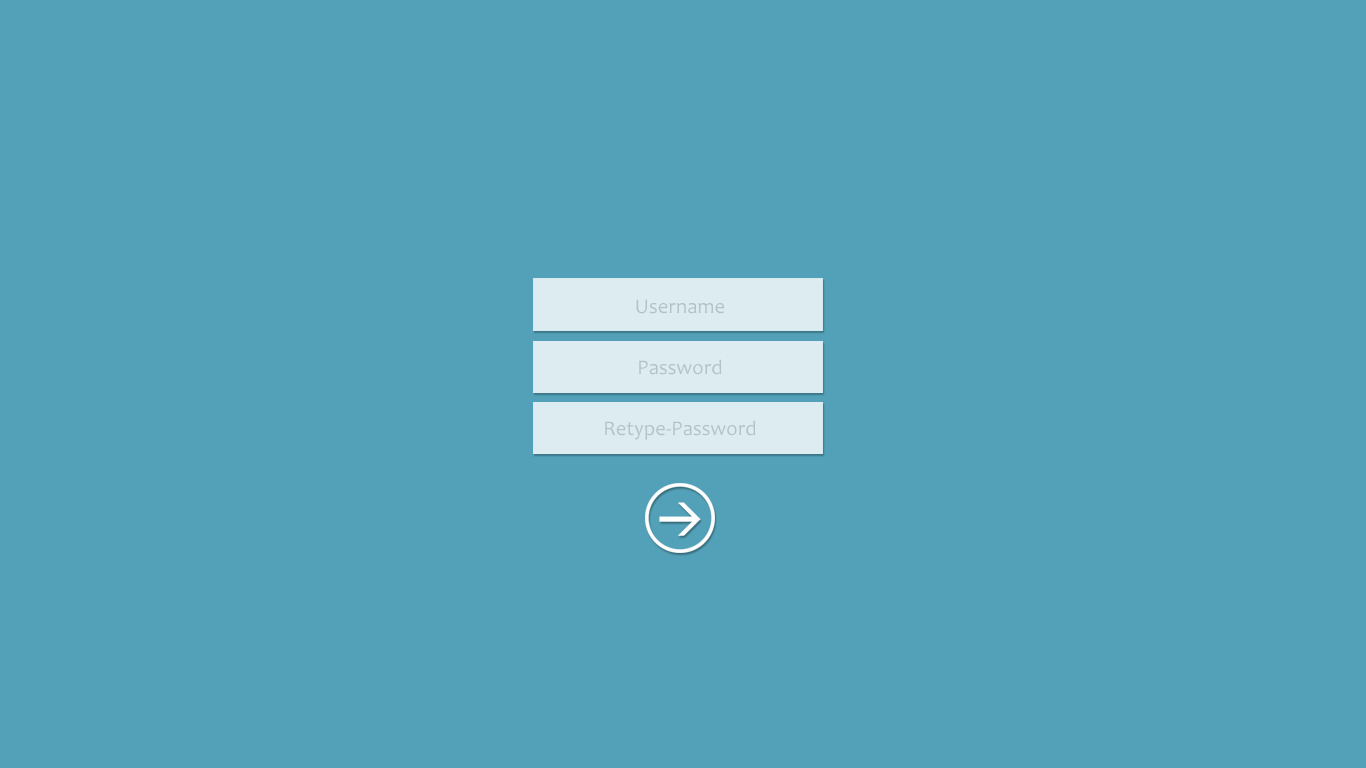
<style>
.page{position:relative;width:1366px;height:768px;background:#53a1b8}
.page>*{position:absolute;margin:0}
.t1{font:20.8px "Candara";color:#b3c2c6}
</style>
<div class="page">
<p class="t1" style="left:636px;top:299px;width:88px;height:15px">Username</p>
<p class="t1" style="left:639px;top:359px;width:83px;height:16px">Password</p>
<p class="t1" style="left:605px;top:420px;width:151px;height:20px">Retype-Password</p>
</div>
